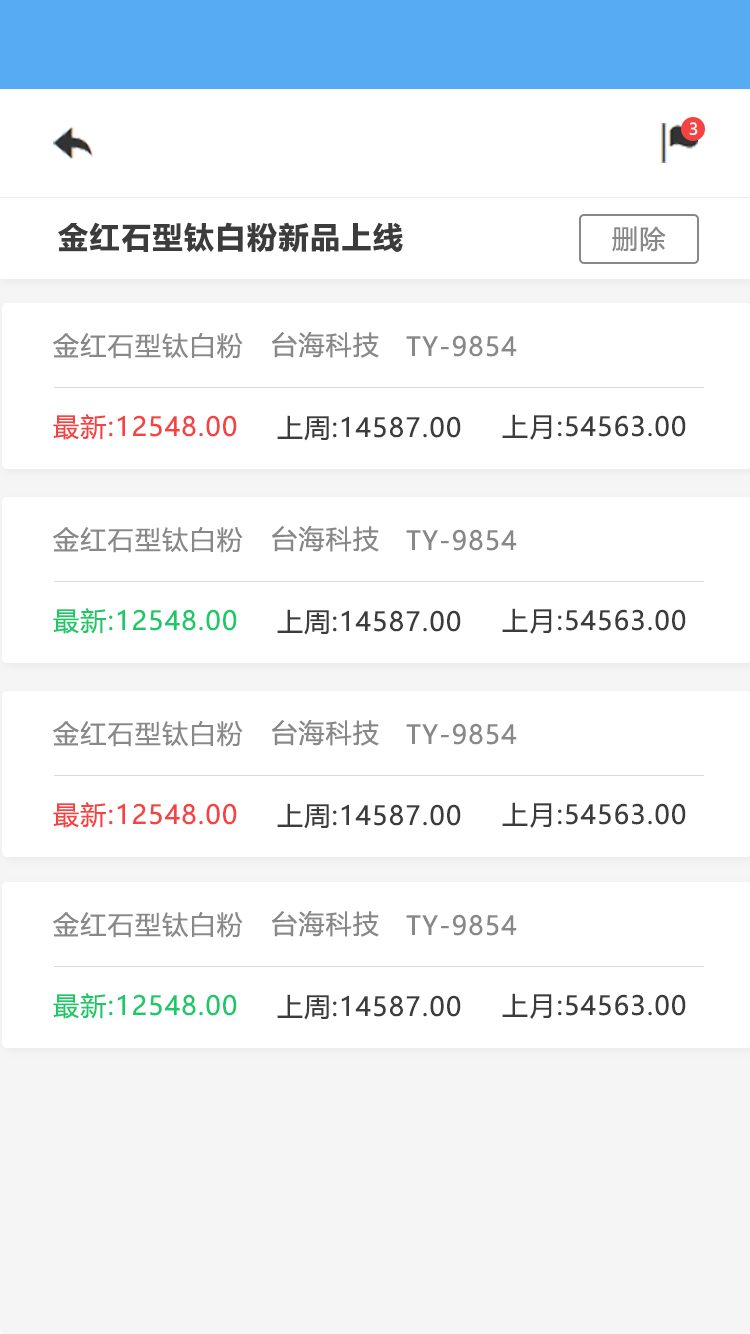
<style>
.page{position:relative;width:750px;height:1334px;background:#ffffff}
.page>*{position:absolute;margin:0}
.t1{font:16px "MicrosoftYaHeiUI";color:#ffffff}
.t2{font:30px "MicrosoftYaHeiUI-Bold";letter-spacing:0.05em;color:#3c3c3c}
.t3{font:26px "MicrosoftYaHeiUI";letter-spacing:0.05em;color:#888888}
.t4{font:26px "MicrosoftYaHeiUI";letter-spacing:0.05em;color:#f54343}
.t5{font:26px "MicrosoftYaHeiUI";letter-spacing:0.05em;color:#3c3c3c}
.t6{font:26px "MicrosoftYaHeiUI";letter-spacing:0.05em;color:#1dc869}
</style>
<div class="page">
<p class="t1" style="left:689px;top:122px;width:9px;height:13px">3</p>
<p class="t2" style="left:58px;top:222px;width:345px;height:31px">金红石型钛白粉新品上线</p>
<p class="t3" style="left:612px;top:226px;width:54px;height:26px">删除</p>
<p class="t3" style="left:53px;top:333px;width:190px;height:26px">金红石型钛白粉</p>
<p class="t3" style="left:272px;top:332px;width:107px;height:26px">台海科技</p>
<p class="t3" style="left:406px;top:335px;width:111px;height:22px">TY-9854</p>
<p class="t4" style="left:53px;top:414px;width:184px;height:26px">最新:12548.00</p>
<p class="t5" style="left:502px;top:414px;width:184px;height:26px">上月:54563.00</p>
<p class="t5" style="left:277px;top:415px;width:184px;height:26px">上周:14587.00</p>
<p class="t3" style="left:53px;top:527px;width:190px;height:26px">金红石型钛白粉</p>
<p class="t3" style="left:272px;top:526px;width:107px;height:26px">台海科技</p>
<p class="t3" style="left:406px;top:529px;width:111px;height:22px">TY-9854</p>
<p class="t6" style="left:53px;top:608px;width:184px;height:26px">最新:12548.00</p>
<p class="t5" style="left:277px;top:609px;width:184px;height:26px">上周:14587.00</p>
<p class="t5" style="left:502px;top:608px;width:184px;height:26px">上月:54563.00</p>
<p class="t3" style="left:53px;top:721px;width:190px;height:26px">金红石型钛白粉</p>
<p class="t3" style="left:272px;top:720px;width:107px;height:26px">台海科技</p>
<p class="t3" style="left:406px;top:723px;width:111px;height:22px">TY-9854</p>
<p class="t4" style="left:53px;top:802px;width:184px;height:26px">最新:12548.00</p>
<p class="t5" style="left:277px;top:803px;width:184px;height:26px">上周:14587.00</p>
<p class="t5" style="left:502px;top:802px;width:184px;height:26px">上月:54563.00</p>
<p class="t3" style="left:53px;top:912px;width:190px;height:26px">金红石型钛白粉</p>
<p class="t3" style="left:272px;top:911px;width:107px;height:26px">台海科技</p>
<p class="t3" style="left:406px;top:914px;width:111px;height:22px">TY-9854</p>
<p class="t6" style="left:53px;top:993px;width:184px;height:26px">最新:12548.00</p>
<p class="t5" style="left:277px;top:994px;width:184px;height:26px">上周:14587.00</p>
<p class="t5" style="left:502px;top:993px;width:184px;height:26px">上月:54563.00</p>
</div>
